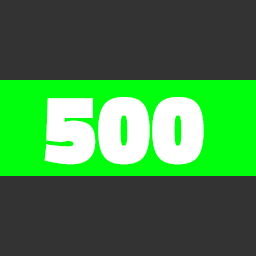
<style>
.page{position:relative;width:256px;height:256px;background:#333333}
.page>*{position:absolute;margin:0}
.t1{font:98.3px "TitilliumWeb-Black";color:#ffffff}
</style>
<div class="page">
<p class="t1" style="left:44px;top:97px;width:160px;height:68px">500</p>
</div>
